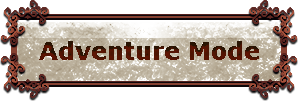
<style>
.page{position:relative;width:298px;height:101px;background:#ffffff}
.page>*{position:absolute;margin:0}
.t1{font:24px "Verdana-Bold";color:#501403}
</style>
<div class="page">
<p class="t1" style="left:39px;top:41px;width:220px;height:19px">Adventure Mode</p>
</div>
